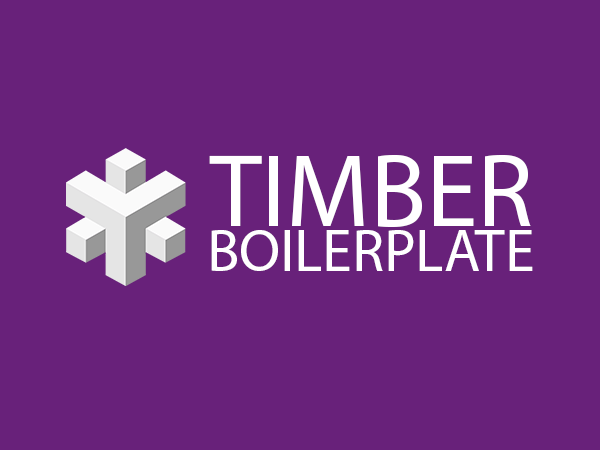
<style>
.page{position:relative;width:600px;height:450px;background:#68217a}
.page>*{position:absolute;margin:0}
.t1{font:104px "MyriadPro-Regular";color:#ffffff;text-transform:uppercase}
.t2{font:59.5px "MyriadPro-Regular";color:#ffffff;text-transform:uppercase}
</style>
<div class="page">
<p class="t1" style="left:209px;top:154px;width:322px;height:73px">TIMBER</p>
<p class="t2" style="left:211px;top:230px;width:322px;height:41px">Boilerplate</p>
</div>
